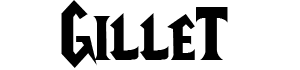
<style>
.page{position:relative;width:300px;height:70px;background:#ffffff}
.page>*{position:absolute;margin:0}
.t1{font:75.9px "LifeCraft";color:#000000}
.t2{font:79.7px "LifeCraft";color:#000000}
</style>
<div class="page">
<p class="t1" style="left:61px;top:0px;width:167px;height:68px"><span class="t2">G</span>illeT</p>
</div>
